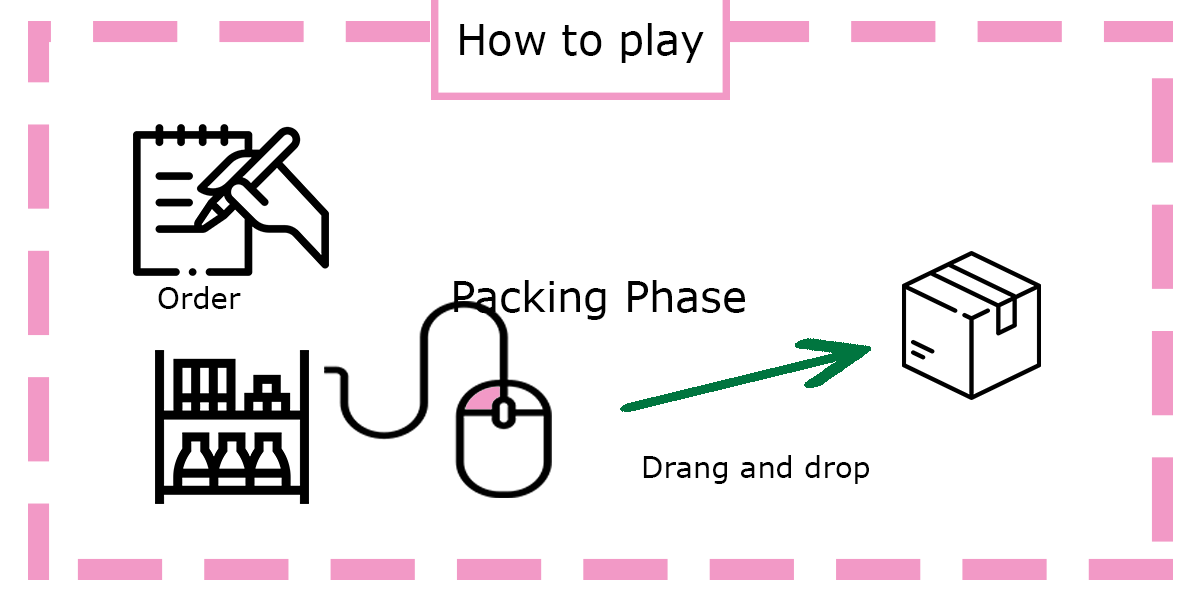
<style>
.page{position:relative;width:1200px;height:600px;background:#ffffff}
.page>*{position:absolute;margin:0}
.t1{font:41.7px "Verdana";color:#000000}
.t2{font:29.2px "Verdana";color:#000000}
</style>
<div class="page">
<p class="t1" style="left:460px;top:23px;width:244px;height:40px">How to play</p>
<p class="t1" style="left:454px;top:280px;width:291px;height:40px">Packing Phase</p>
<p class="t2" style="left:158px;top:286px;width:83px;height:23px">Order</p>
<p class="t2" style="left:643px;top:455px;width:226px;height:29px">Drang and drop</p>
</div>
